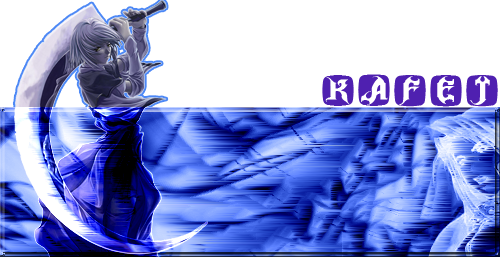
<style>
.page{position:relative;width:500px;height:257px;background:#ffffff}
.page>*{position:absolute;margin:0}
.t1{font:36px "HauntedBricks";color:#4f20b0}
</style>
<div class="page">
<p class="t1" style="left:322px;top:74px;width:176px;height:33px">kafej</p>
</div>
